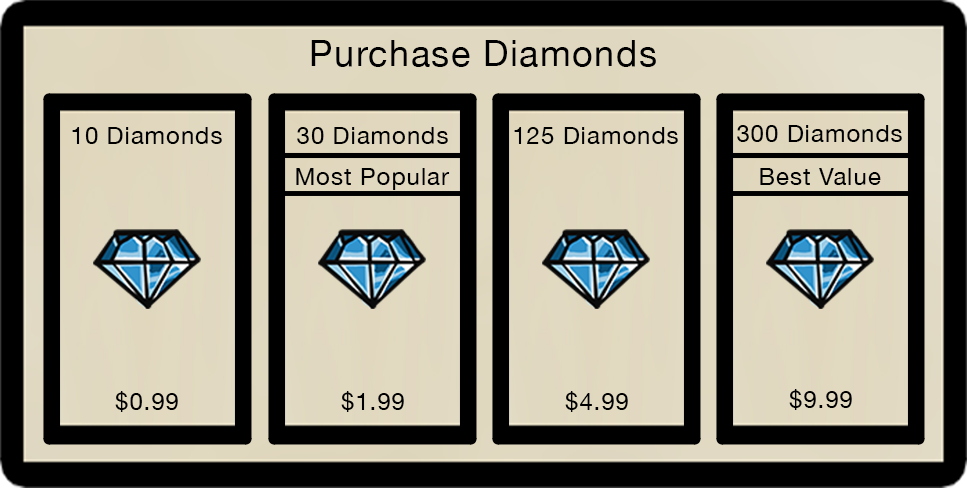
<style>
.page{position:relative;width:967px;height:488px;background:#000000}
.page>*{position:absolute;margin:0}
.t1{font:36px "HelveticaNeue";letter-spacing:0.04em;color:#000000}
.t2{font:24px "HelveticaNeue";letter-spacing:0.04em;color:#000000}
</style>
<div class="page">
<p class="t1" style="left:311px;top:40px;width:345px;height:27px">Purchase Diamonds</p>
<p class="t2" style="left:737px;top:125px;width:165px;height:17px">300 Diamonds</p>
<p class="t2" style="left:72px;top:127px;width:150px;height:17px">10 Diamonds</p>
<p class="t2" style="left:297px;top:127px;width:151px;height:17px">30 Diamonds</p>
<p class="t2" style="left:514px;top:127px;width:164px;height:17px">125 Diamonds</p>
<p class="t2" style="left:296px;top:168px;width:154px;height:22px">Most Popular</p>
<p class="t2" style="left:760px;top:168px;width:121px;height:17px">Best Value</p>
<p class="t2" style="left:789px;top:389px;width:63px;height:21px">$9.99</p>
<p class="t2" style="left:115px;top:391px;width:63px;height:21px">$0.99</p>
<p class="t2" style="left:341px;top:391px;width:63px;height:21px">$1.99</p>
<p class="t2" style="left:565px;top:391px;width:63px;height:21px">$4.99</p>
</div>
